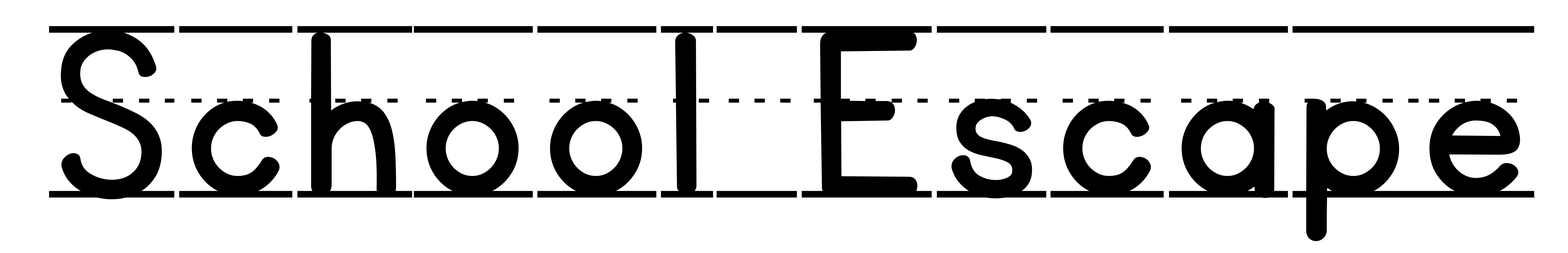
<style>
.page{position:relative;width:1568px;height:253px;background:#ffffff}
.page>*{position:absolute;margin:0}
.t1{font:269.4px "KGPrimaryPenmanshipLined";letter-spacing:0.025em;color:#000000}
</style>
<div class="page">
<p class="t1" style="left:49px;top:26px;width:1486px;height:215px">School Escape</p>
</div>
